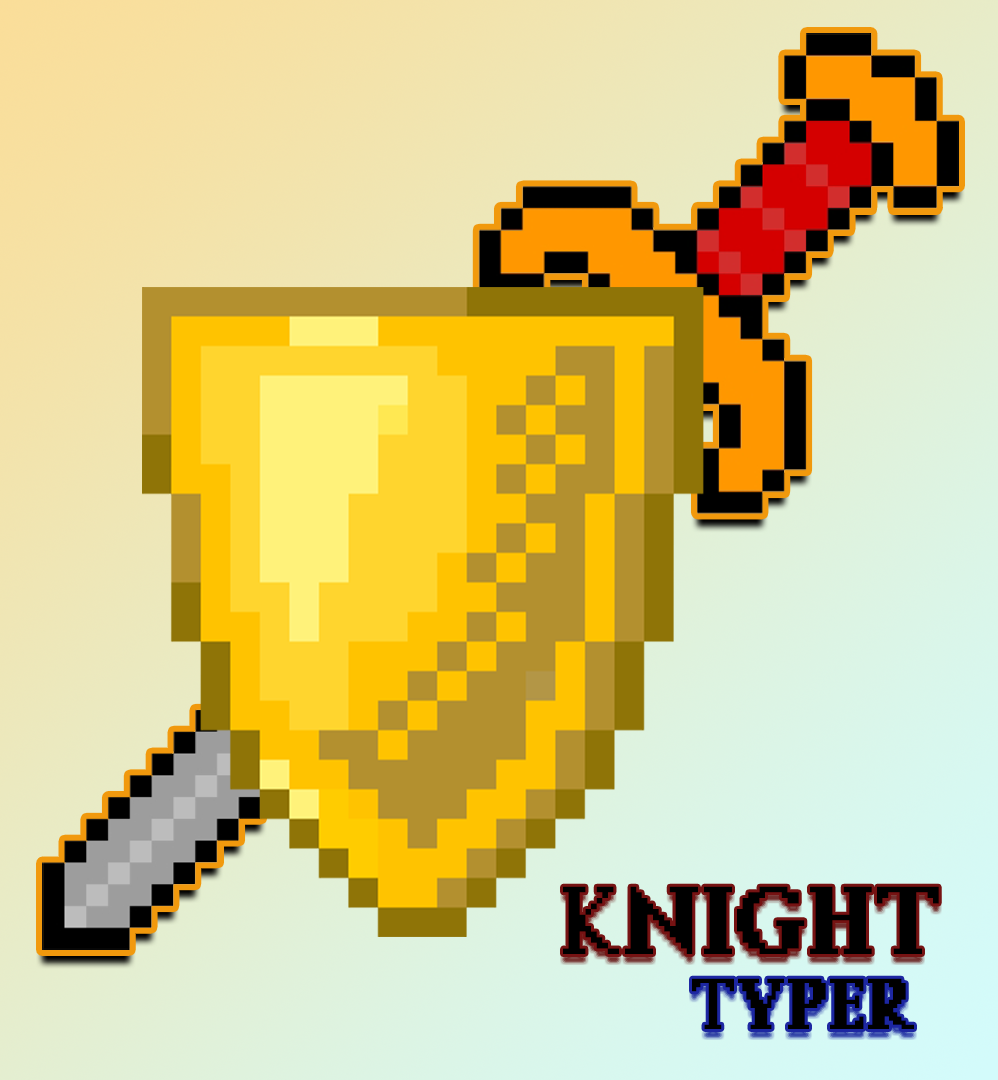
<style>
.page{position:relative;width:998px;height:1080px}
.page>*{position:absolute;margin:0}
.t1{font:89.7px "Vastantonius";color:#000000}
.t2{font:67.1px "Vastantonius";color:#000000}
</style>
<div class="page">
<p class="t1" style="left:563px;top:886px;width:376px;height:68px">Knight</p>
<p class="t2" style="left:692px;top:978px;width:222px;height:51px">Typer</p>
</div>
